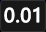
<style>
.page{position:relative;width:46px;height:32px;background:#181818}
.page>*{position:absolute;margin:0}
.t1{font:18.7px "MicrosoftYaHeiUI";color:#fffefe;font-weight:bold}
</style>
<div class="page">
<p class="t1" style="left:4px;top:7px;width:36px;height:16px">0.01</p>
</div>
